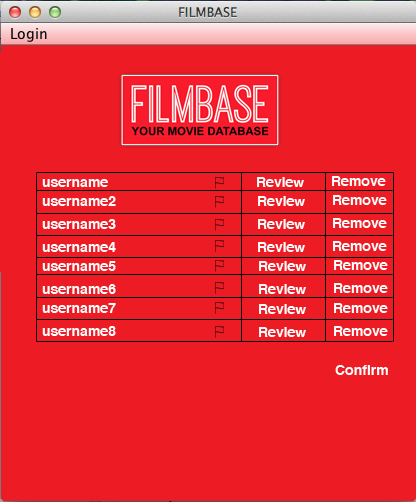
<style>
.page{position:relative;width:416px;height:502px;background:#ed1c24}
.page>*{position:absolute;margin:0}
.t1{font:14px "Helvetica-Bold";color:#ffffff}
</style>
<div class="page">
<p class="t1" style="left:42px;top:179px;width:66px;height:8px">username</p>
<p class="t1" style="left:257px;top:177px;width:47px;height:10px">Review</p>
<p class="t1" style="left:332px;top:176px;width:54px;height:10px">Remove</p>
<p class="t1" style="left:42px;top:196px;width:74px;height:10px">username2</p>
<p class="t1" style="left:258px;top:196px;width:47px;height:10px">Review</p>
<p class="t1" style="left:333px;top:195px;width:54px;height:10px">Remove</p>
<p class="t1" style="left:42px;top:219px;width:74px;height:10px">username3</p>
<p class="t1" style="left:258px;top:219px;width:47px;height:10px">Review</p>
<p class="t1" style="left:333px;top:218px;width:54px;height:10px">Remove</p>
<p class="t1" style="left:42px;top:242px;width:74px;height:10px">username4</p>
<p class="t1" style="left:258px;top:242px;width:47px;height:10px">Review</p>
<p class="t1" style="left:333px;top:241px;width:54px;height:10px">Remove</p>
<p class="t1" style="left:42px;top:261px;width:74px;height:10px">username5</p>
<p class="t1" style="left:259px;top:261px;width:47px;height:10px">Review</p>
<p class="t1" style="left:334px;top:260px;width:54px;height:10px">Remove</p>
<p class="t1" style="left:42px;top:284px;width:74px;height:10px">username6</p>
<p class="t1" style="left:259px;top:284px;width:47px;height:10px">Review</p>
<p class="t1" style="left:334px;top:283px;width:54px;height:10px">Remove</p>
<p class="t1" style="left:42px;top:303px;width:74px;height:10px">username7</p>
<p class="t1" style="left:259px;top:304px;width:47px;height:10px">Review</p>
<p class="t1" style="left:334px;top:303px;width:54px;height:10px">Remove</p>
<p class="t1" style="left:42px;top:326px;width:74px;height:10px">username8</p>
<p class="t1" style="left:259px;top:327px;width:47px;height:10px">Review</p>
<p class="t1" style="left:334px;top:326px;width:54px;height:10px">Remove</p>
<p class="t1" style="left:335px;top:365px;width:53px;height:10px">Confirm</p>
</div>
